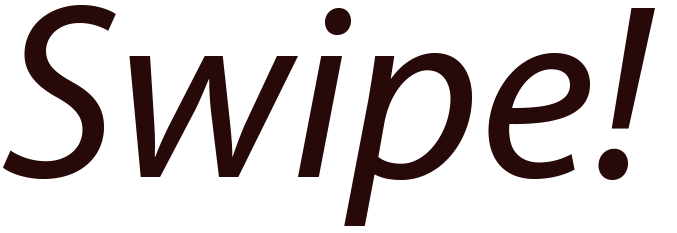
<style>
.page{position:relative;width:677px;height:233px;background:#ffffff}
.page>*{position:absolute;margin:0}
.t1{font:250px "MyriadPro-It";color:#270909}
</style>
<div class="page">
<p class="t1" style="left:3px;top:5px;width:652px;height:221px">Swipe!</p>
</div>
